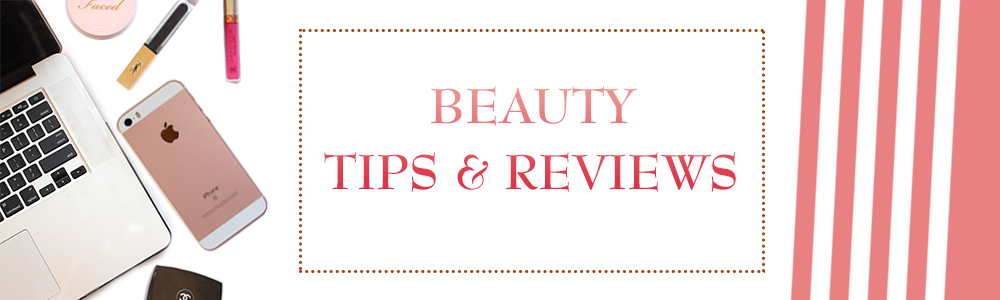
<style>
.page{position:relative;width:1000px;height:300px;background:#ffffff}
.page>*{position:absolute;margin:0}
.t1{font:48px/22px "UVNBaiHocBold";letter-spacing:0.001em}
</style>
<div class="page">
<p class="t1" style="left:324px;top:86px;width:412px;height:107px;text-align:center">BEAUTY <br><br><br>TIPS &amp; REVIEWS</p>
</div>
